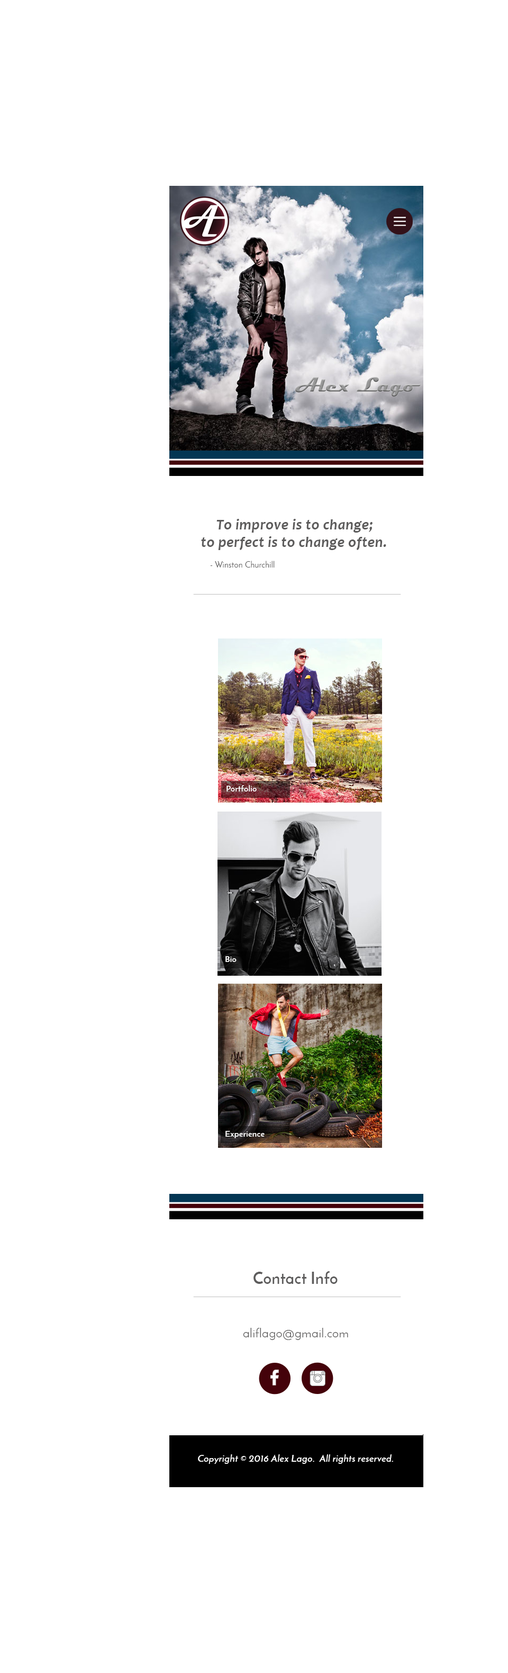
<style>
.page{position:relative;width:508px;height:1673px;background:#ffffff}
.page>*{position:absolute;margin:0}
.t1{font:14.8px "Candara-BoldItalic";letter-spacing:0.02em;color:#5d5c5c}
.t2{font:15.9px "JosefinSlab-BoldItalic";letter-spacing:0.02em;color:#5d5c5c}
.t3{font:8.5px "JosefinSans";letter-spacing:0.02em;color:#5d5c5c}
.t4{font:8.5px "JosefinSans-Bold";letter-spacing:0.02em;color:#ffffff}
.t5{font:15.9px "JosefinSans-Bold";letter-spacing:0.02em;color:#5d5c5c}
.t6{font:12.7px "JosefinSans";letter-spacing:0.02em;color:#5d5c5c}
.t7{font:9.5px "JosefinSans-BoldItalic";letter-spacing:0.02em;color:#fdfdfd}
</style>
<div class="page">
<p class="t1" style="left:201px;top:519px;width:185px;height:31px"><span class="t2">   </span>To improve is to change;<br>to perfect is to change often.</p>
<p class="t3" style="left:210px;top:561px;width:65px;height:7px">- Winston Churchill</p>
<p class="t4" style="left:227px;top:785px;width:30px;height:6px">Portfolio</p>
<p class="t4" style="left:226px;top:956px;width:11px;height:6px">Bio</p>
<p class="t4" style="left:226px;top:1131px;width:39px;height:7px">Experience</p>
<p class="t5" style="left:254px;top:1271px;width:84px;height:13px">Contact Info</p>
<p class="t6" style="left:243px;top:1328px;width:105px;height:12px">aliflago@gmail.com</p>
<p class="t7" style="left:198px;top:1454px;width:195px;height:10px">Copyright © 2016 Alex Lago.  All rights reserved.</p>
</div>
